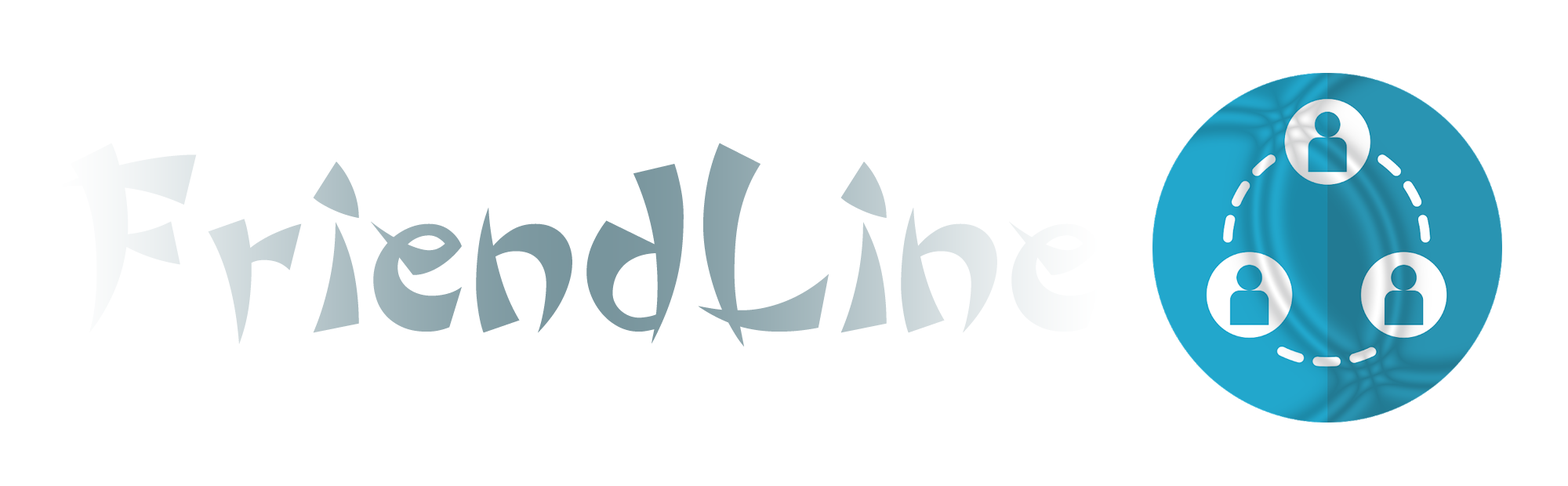
<style>
.page{position:relative;width:1568px;height:486px;background:#ffffff}
.page>*{position:absolute;margin:0}
.t1{font:246.2px "Brabion-Medium";letter-spacing:-0.006em}
</style>
<div class="page">
<p class="t1" style="left:56px;top:143px;width:1044px;height:204px">FriendLine</p>
</div>
